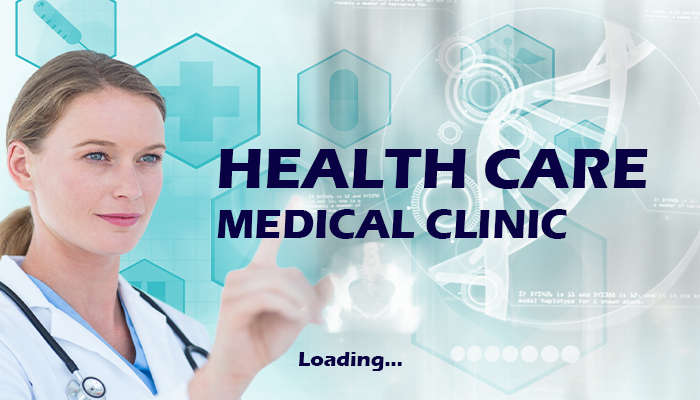
<style>
.page{position:relative;width:700px;height:400px}
.page>*{position:absolute;margin:0}
.t1{font:41.7px "ErasITC-Bold";color:#090144}
.t2{font:58.3px "ErasITC-Bold";color:#090144}
.t3{font:20.8px "ErasITC-Bold";color:#090143}
</style>
<div class="page">
<p class="t1" style="left:217px;top:149px;width:431px;height:90px"><span class="t2">HEALTH CARE<br></span>MEDICAL CLINIC</p>
<p class="t3" style="left:299px;top:352px;width:103px;height:19px">Loading...</p>
</div>
